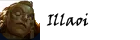
<style>
.page{position:relative;width:140px;height:40px;background:#ffffff}
.page>*{position:absolute;margin:0}
.t1{font:12px "VinerHandITC";color:#000000}
</style>
<div class="page">
<p class="t1" style="left:46px;top:13px;width:43px;height:14px">Illaoi</p>
</div>
